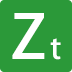
<style>
.page{position:relative;width:72px;height:72px;background:#2b9939}
.page>*{position:absolute;margin:0}
.t1{font:60px "AdobeHeitiStd-Regular";color:#ffffff}
.t2{font:30px "AdobeHeitiStd-Regular";color:#ffffff}
</style>
<div class="page">
<p class="t1" style="left:12px;top:13px;width:33px;height:46px">Z</p>
<p class="t2" style="left:50px;top:38px;width:11px;height:22px">t</p>
</div>
